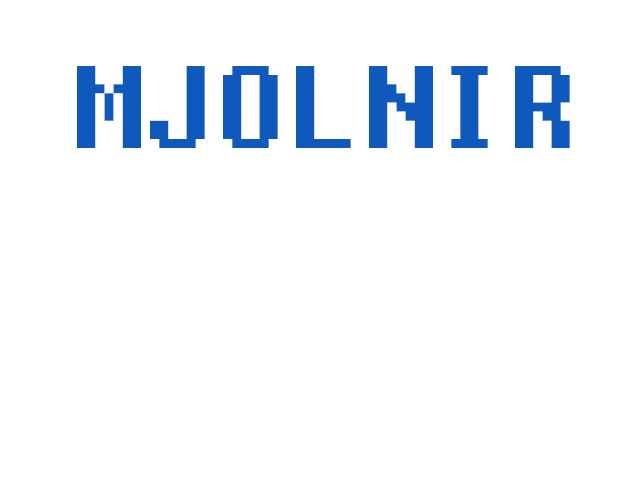
<style>
.page{position:relative;width:640px;height:480px;background:#ffffff}
.page>*{position:absolute;margin:0}
.t1{font:116.6px "Fixedsys";color:#105abe}
</style>
<div class="page">
<p class="t1" style="left:77px;top:66px;width:493px;height:82px">MJOLNIR</p>
</div>
